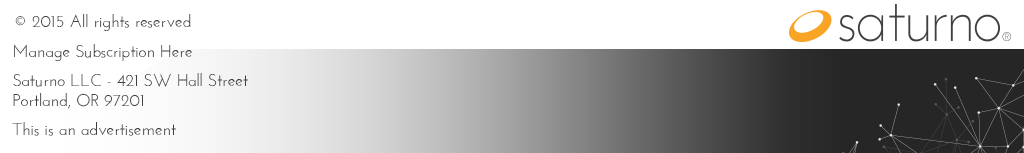
<style>
.page{position:relative;width:1024px;height:153px;background:#ffffff}
.page>*{position:absolute;margin:0}
.t1{font:17px "JosefinSans";color:#414040}
.t2{font:17px "JosefinSans";color:#414040;text-transform:uppercase}
</style>
<div class="page">
<p class="t1" style="left:15px;top:14px;width:176px;height:17px"><span class="t2">© 2015 A</span>ll rights reserved</p>
<p class="t1" style="left:14px;top:44px;width:178px;height:17px">Manage Subscription Here</p>
<p class="t1" style="left:13px;top:73px;width:235px;height:36px">Saturno LLC - 421 SW Hall Street<br>Portland, OR 97201</p>
<p class="t1" style="left:12px;top:122px;width:164px;height:14px">This is an advertisement</p>
</div>
